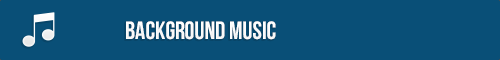
<style>
.page{position:relative;width:500px;height:60px;background:#094f77}
.page>*{position:absolute;margin:0}
.t1{font:25px "UTM-Bebas";color:#ffffff}
</style>
<div class="page">
<p class="t1" style="left:126px;top:21px;width:150px;height:19px">background music</p>
</div>
